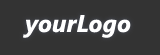
<style>
.page{position:relative;width:160px;height:55px;background:#333333}
.page>*{position:absolute;margin:0}
.t1{font:24px "SegoeUI-BoldItalic";letter-spacing:0.01em;color:#ffffff}
</style>
<div class="page">
<p class="t1" style="left:23px;top:15px;width:108px;height:23px">yourLogo</p>
</div>
